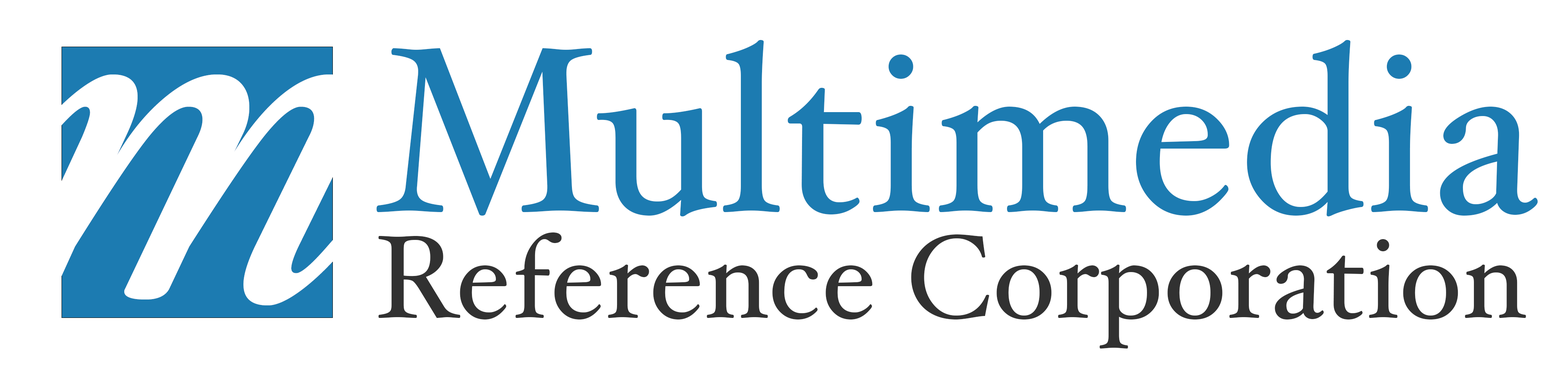
<style>
.page{position:relative;width:1568px;height:392px;background:#ffffff}
.page>*{position:absolute;margin:0}
.t1{font:235.2px "HoeflerText-Regular";color:#1c7bb1}
.t2{font:499.7px "HoeflerText-Italic";letter-spacing:-0.15em;color:#ffffff}
.t3{font:117.6px "HoeflerText-Regular";color:#313131}
</style>
<div class="page">
<p class="t1" style="left:376px;top:40px;width:1162px;height:176px">Multimedia</p>
<p class="t2" style="left:11px;top:74px;width:350px;height:231px">m</p>
<p class="t3" style="left:378px;top:232px;width:1148px;height:116px">Reference Corporation</p>
</div>
